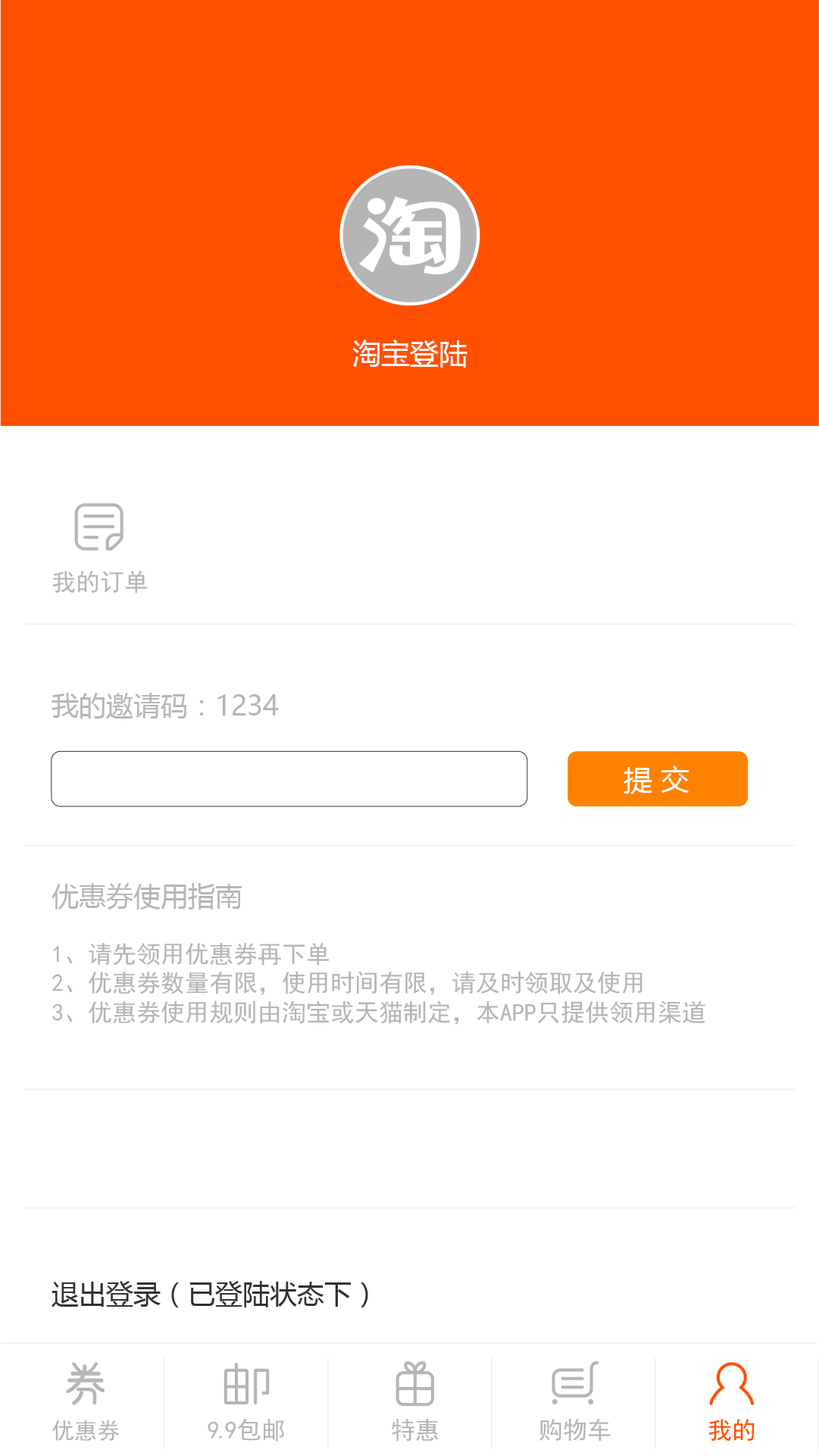
<style>
.page{position:relative;width:819px;height:1456px;background:#ffffff}
.page>*{position:absolute;margin:0}
.t1{font:28.8px "MicrosoftYaHei";color:#ffffff}
.t2{font:24.2px "SimHei";color:#b5b5b5}
.t3{font:27.3px "MicrosoftYaHei";color:#b5b5b5}
.t4{font:27.3px "MicrosoftYaHei";color:#313131}
.t5{font:22.7px "SimHei";color:#b5b5b5}
.t6{font:24.2px "SimHei";color:#ff5100}
</style>
<div class="page">
<p class="t1" style="left:352px;top:339px;width:116px;height:29px">淘宝登陆</p>
<p class="t2" style="left:52px;top:570px;width:95px;height:23px">我的订单</p>
<p class="t3" style="left:52px;top:693px;width:227px;height:26px">我的邀请码：1234</p>
<p class="t1" style="left:624px;top:765px;width:65px;height:29px">提 交</p>
<p class="t3" style="left:52px;top:883px;width:190px;height:26px">优惠券使用指南</p>
<p class="t2" style="left:52px;top:942px;width:653px;height:83px">1、请先领用优惠券再下单<br>2、优惠券数量有限，使用时间有限，请及时领取及使用<br>3、优惠券使用规则由淘宝或天猫制定，本APP只提供领用渠道</p>
<p class="t4" style="left:52px;top:1281px;width:316px;height:26px">退出登录（已登陆状态下）</p>
<p class="t5" style="left:52px;top:1419px;width:67px;height:22px">优惠券</p>
<p class="t2" style="left:208px;top:1418px;width:76px;height:23px">9.9包邮</p>
<p class="t2" style="left:392px;top:1419px;width:47px;height:22px">特惠</p>
<p class="t2" style="left:540px;top:1418px;width:71px;height:23px">购物车</p>
<p class="t6" style="left:709px;top:1419px;width:46px;height:22px">我的</p>
</div>
